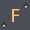
<style>
.page{position:relative;width:30px;height:30px;background:#4c4f58}
.page>*{position:absolute;margin:0}
.t1{font:19.1px "MyriadPro-Regular";color:#ffc178}
</style>
<div class="page">
<p class="t1" style="left:12px;top:9px;width:8px;height:13px">F</p>
</div>
